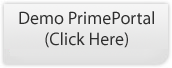
<style>
.page{position:relative;width:172px;height:68px}
.page>*{position:absolute;margin:0}
.t1{font:18px "MyriadPro-Regular";color:#2f2f2f}
</style>
<div class="page">
<p class="t1" style="left:19px;top:11px;width:135px;height:37px;text-align:center">Demo PrimePortal<br>(Click Here)</p>
</div>
